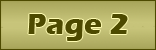
<style>
.page{position:relative;width:156px;height:50px}
.page>*{position:absolute;margin:0}
.t1{font:30px "ErasITC-Bold";color:#4d4a00}
</style>
<div class="page">
<p class="t1" style="left:28px;top:14px;width:100px;height:27px">Page 2</p>
</div>
